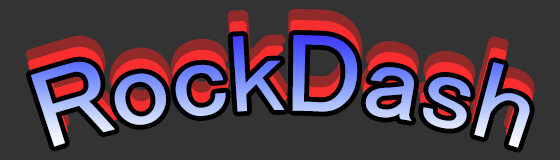
<style>
.page{position:relative;width:560px;height:160px;background:#333333}
.page>*{position:absolute;margin:0}
.t1{font:111.9px "MS-PGothic"}
</style>
<div class="page">
<p class="t1" style="left:31px;top:35px;width:499px;height:113px">RockDash</p>
</div>
